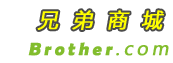
<style>
.page{position:relative;width:173px;height:63px;background:#ffffff}
.page>*{position:absolute;margin:0}
.t1{font:20px "MicrosoftYaHei";letter-spacing:0.7em;color:#ffff00;font-weight:bold;font-style:italic}
.t2{font:18px "BerlinSansFBDemi-Bold";letter-spacing:0.18em;color:#82bd2d;font-weight:bold;font-style:italic}
.t3{font:18px "MicrosoftYaHei";letter-spacing:0.18em;color:#82bd2d;font-weight:bold;font-style:italic}
</style>
<div class="page">
<p class="t1" style="left:37px;top:10px;width:127px;height:20px">兄弟商城</p>
<p class="t2" style="left:28px;top:42px;width:141px;height:14px">Brother<span class="t3">.com</span></p>
</div>
